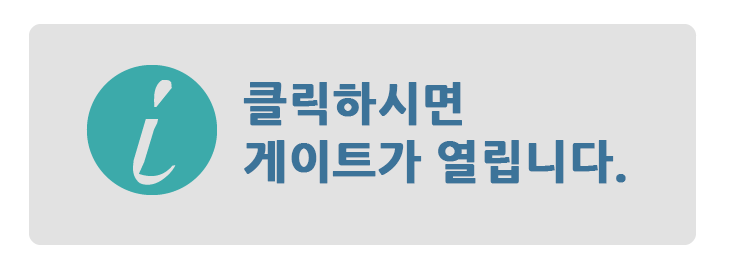
<style>
.page{position:relative;width:736px;height:270px;background:#e2e2e2}
.page>*{position:absolute;margin:0}
.t1{font:46px/58px "NanumGothicExtraBold";color:#3c7399;font-weight:bold}
</style>
<div class="page">
<p class="t1" style="left:243px;top:82px;width:383px;height:102px;text-align:justify">클릭하시면 <br>게이트가 열립니다.</p>
</div>
